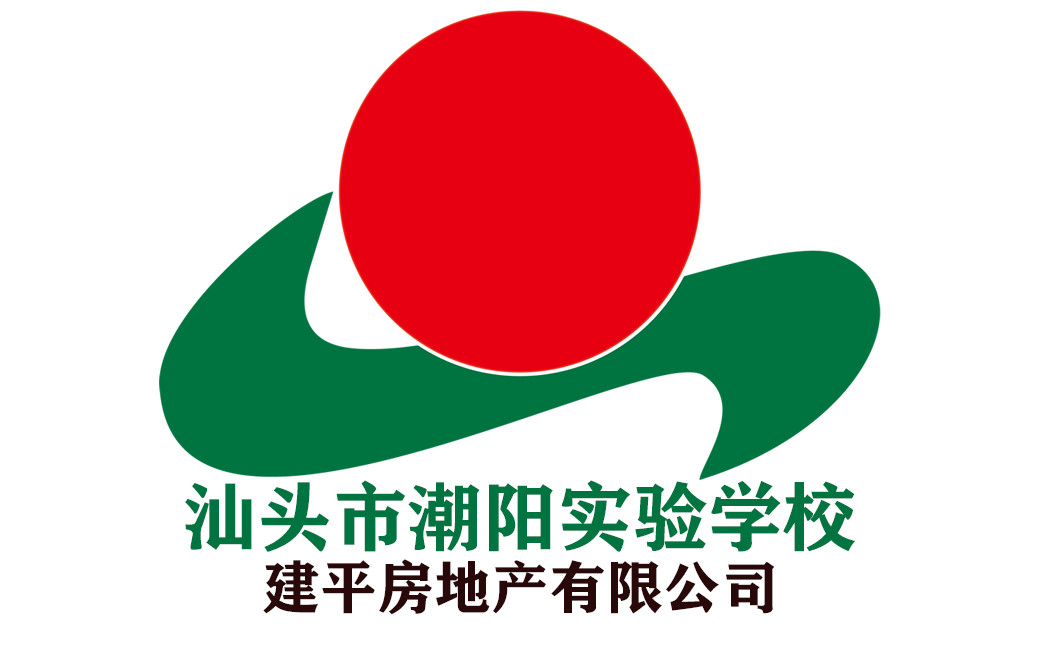
<style>
.page{position:relative;width:1039px;height:650px;background:#ffffff}
.page>*{position:absolute;margin:0}
.t1{font:75px "FZCHSJW--GB1-0";color:#007440}
.t2{font:57.3px "FZCHSJW--GB1-0";color:#29080a}
</style>
<div class="page">
<p class="t1" style="left:185px;top:480px;width:670px;height:72px">汕头市潮阳实验学校</p>
<p class="t2" style="left:263px;top:559px;width:512px;height:56px">建平房地产有限公司</p>
</div>
